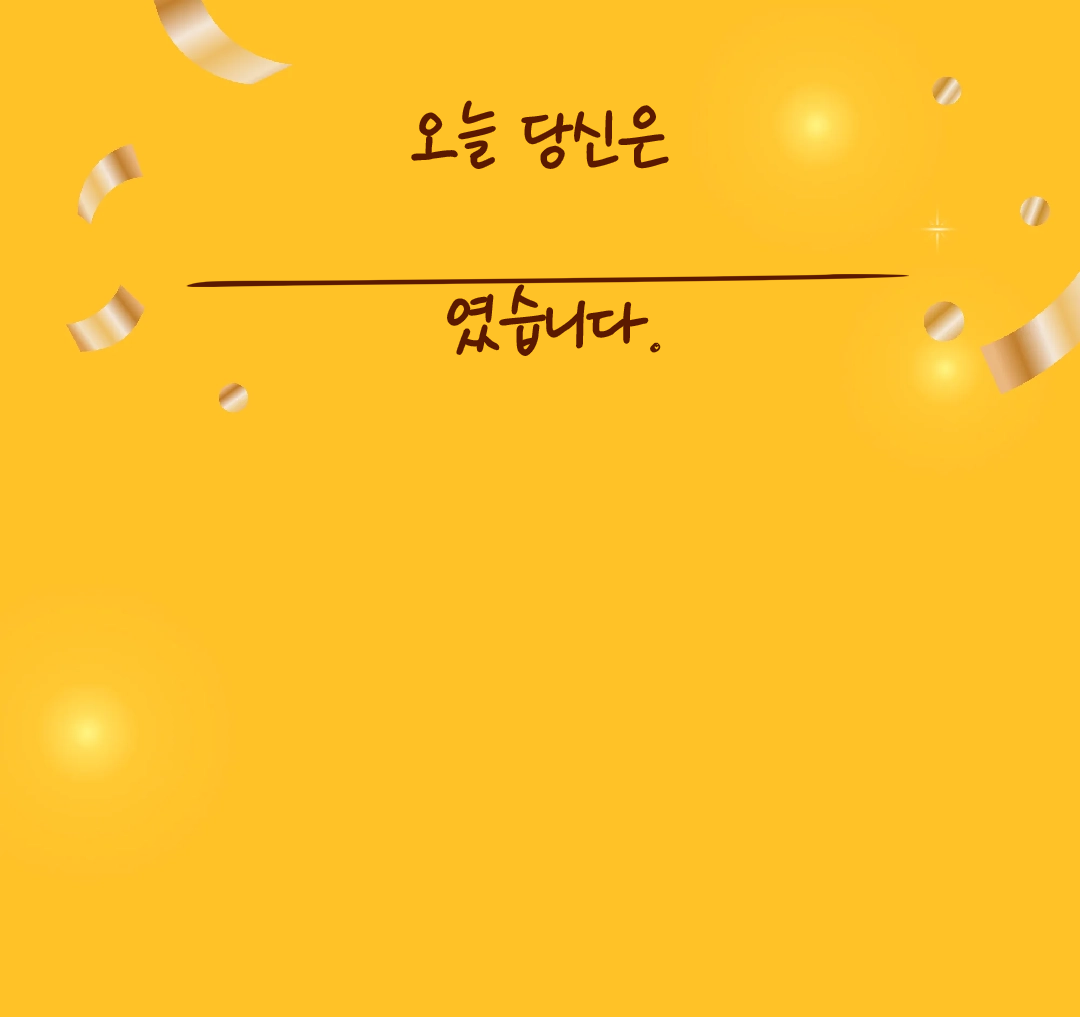
<style>
.page{position:relative;width:1080px;height:1017px;background:#ffc227}
.page>*{position:absolute;margin:0}
.t1{font:84px "NanumGyuRiEuiIrGi";color:#5b1900}
</style>
<div class="page">
<p class="t1" style="left:413px;top:102px;width:254px;height:65px">오늘 당신은</p>
<p class="t1" style="left:449px;top:286px;width:198px;height:68px">였습니다</p>
<p class="t1" style="left:650px;top:342px;width:11px;height:11px">.</p>
</div>
